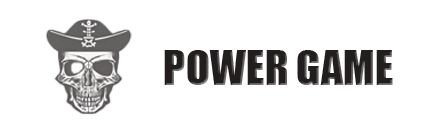
<style>
.page{position:relative;width:436px;height:133px;background:#ffffff}
.page>*{position:absolute;margin:0}
.t1{font:44.4px "Impact";color:#221e1e;text-transform:uppercase}
</style>
<div class="page">
<p class="t1" style="left:164px;top:50px;width:229px;height:35px">power game</p>
</div>
